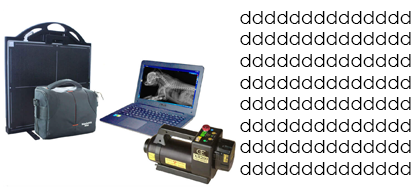
<style>
.page{position:relative;width:420px;height:191px;background:#ffffff}
.page>*{position:absolute;margin:0}
.t1{font:18px "CenturyGothic";color:#000000}
</style>
<div class="page">
<p class="t1" style="left:240px;top:11px;width:171px;height:164px;text-align:center">ddddddddddddddddddddddddddddddddddddddddddddddddddddddddddddddddddddddddddddddddddddddddddddddddddddddddddddddddddddd</p>
</div>
